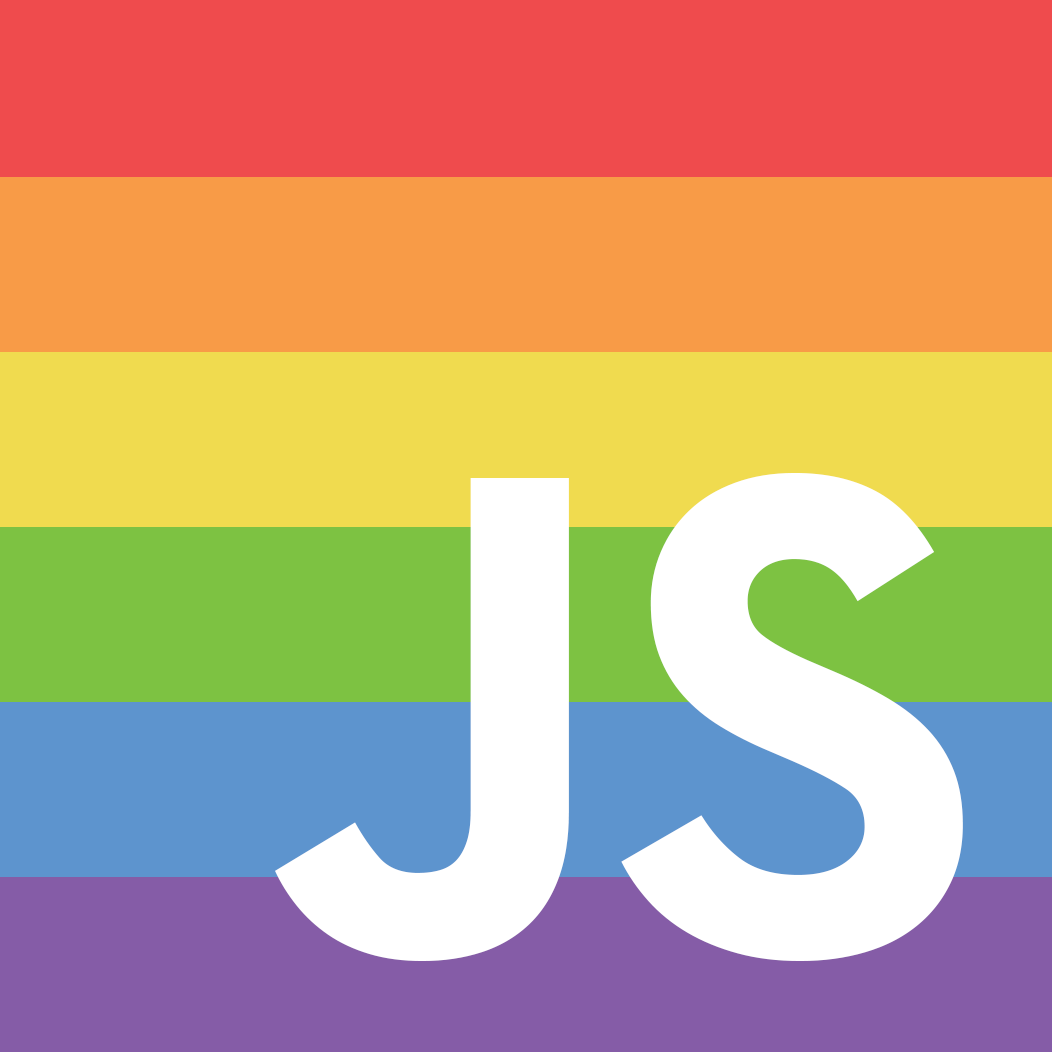
<style>
.page{position:relative;width:1052px;height:1052px}
.page>*{position:absolute;margin:0}
.t1{font:701px "NeutraTextTF-BoldAlt";color:#ffffff}
</style>
<div class="page">
<p class="t1" style="left:275px;top:473px;width:688px;height:488px">JS</p>
</div>
